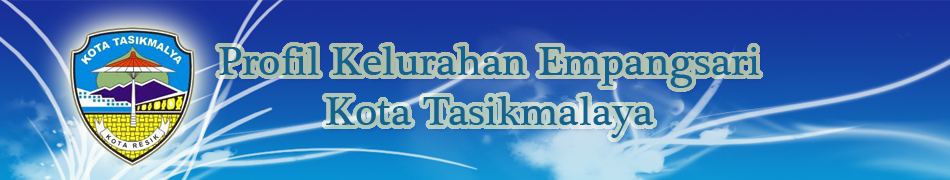
<style>
.page{position:relative;width:950px;height:180px}
.page>*{position:absolute;margin:0}
.t1{font:42px "PlantagenetCherokee";color:#13628f}
</style>
<div class="page">
<p class="t1" style="left:219px;top:46px;width:541px;height:92px;text-align:center">Profil Kelurahan Empangsari<br>Kota Tasikmalaya</p>
</div>
